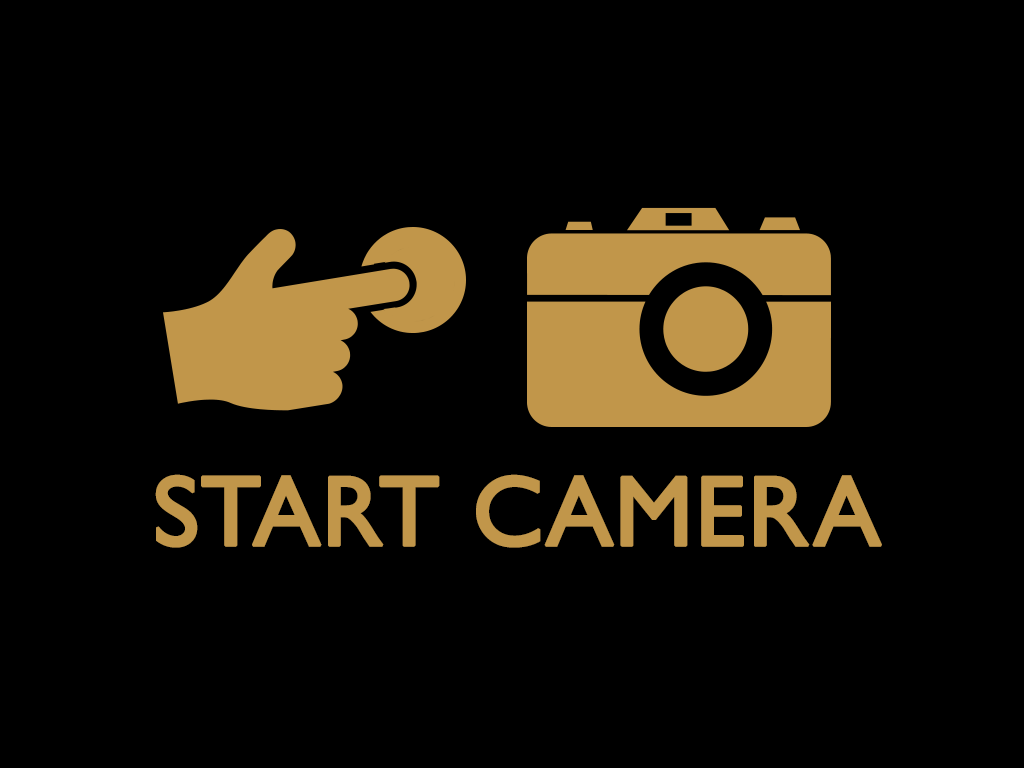
<style>
.page{position:relative;width:1024px;height:768px;background:#000000}
.page>*{position:absolute;margin:0}
.t1{font:100px "GillSans";color:#c1964a;font-weight:bold}
</style>
<div class="page">
<p class="t1" style="left:155px;top:474px;width:727px;height:74px">START CAMERA</p>
</div>
